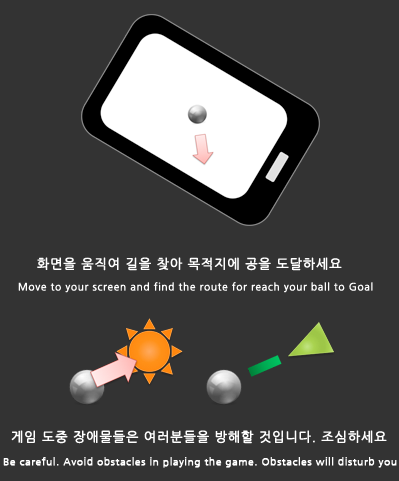
<style>
.page{position:relative;width:399px;height:481px;background:#333333}
.page>*{position:absolute;margin:0}
.t1{font:13px "NanumGothic";letter-spacing:0.05em;color:#ffffff;font-weight:bold}
.t2{font:10px "NanumGothic";letter-spacing:0.05em;color:#ffffff;font-weight:bold}
.t3{font:10px "NanumGothic";letter-spacing:0.045em;color:#ffffff;font-weight:bold}
</style>
<div class="page">
<p class="t1" style="left:37px;top:257px;width:305px;height:14px">화면을 움직여 길을 찾아 목적지에 공을 도달하세요</p>
<p class="t2" style="left:18px;top:282px;width:355px;height:11px">Move to your screen and find the route for reach your ball to Goal</p>
<p class="t1" style="left:11px;top:430px;width:376px;height:14px">게임 도중 장애물들은 여러분들을 방해할 것입니다. 조심하세요</p>
<p class="t3" style="left:3px;top:457px;width:394px;height:11px">Be careful. Avoid obstacles in playing the game. Obstacles will disturb you</p>
</div>
